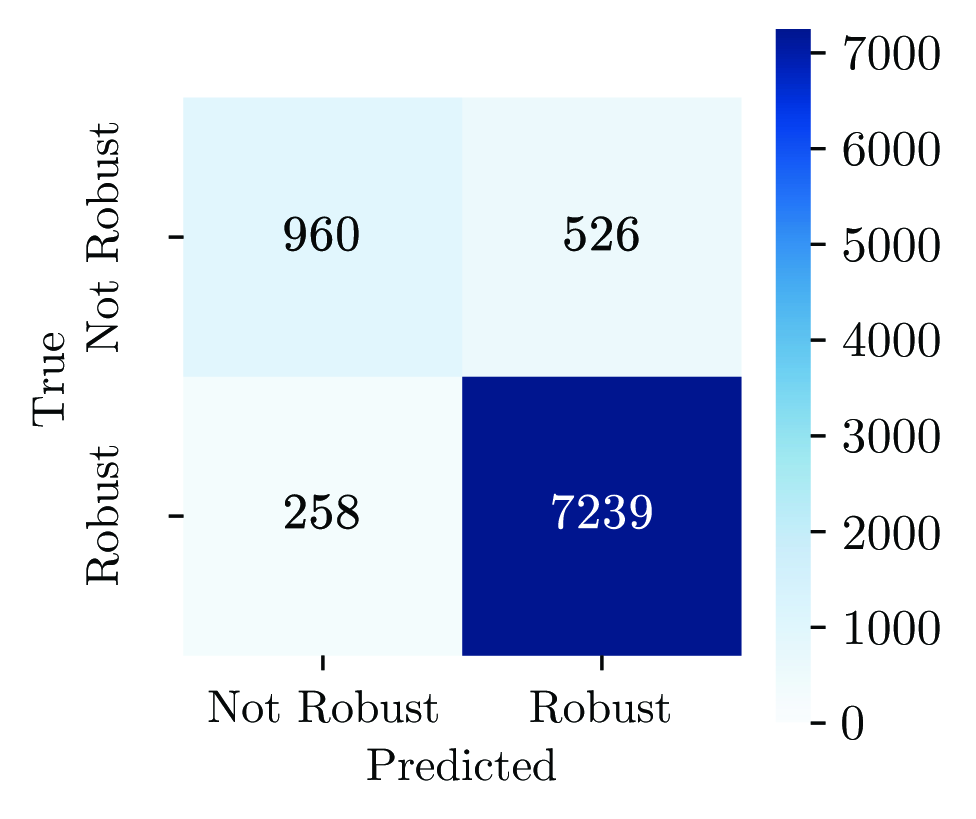
<style>
.page{position:relative;width:976px;height:819px;background:#ffffff}
.page>*{position:absolute;margin:0}
.t1{font:50px "CMUSerif-Roman";color:#060808}
.t2{font:45.8px "CMUSerif-Roman";color:#060808}
.t3{font:50px "CMUSerif-Roman";color:#060808;font-weight:bold}
.t4{font:50px "CMUSerif-Roman";color:#ffffff;font-weight:bold}
</style>
<div class="page">
<p class="t1" style="left:844px;top:35px;width:96px;height:35px">7000</p>
<p class="t2" style="left:86px;top:123px;width:33px;height:229px;rotate:-90deg">Not Robust</p>
<p class="t1" style="left:843px;top:131px;width:97px;height:35px">6000</p>
<p class="t3" style="left:284px;top:216px;width:75px;height:36px">960</p>
<p class="t3" style="left:564px;top:216px;width:75px;height:36px">526</p>
<p class="t1" style="left:843px;top:227px;width:97px;height:35px">5000</p>
<p class="t1" style="left:843px;top:322px;width:97px;height:35px">4000</p>
<p class="t2" style="left:32px;top:333px;width:33px;height:94px;rotate:-90deg">True</p>
<p class="t1" style="left:843px;top:418px;width:97px;height:35px">3000</p>
<p class="t2" style="left:86px;top:446px;width:33px;height:139px;rotate:-90deg">Robust</p>
<p class="t3" style="left:285px;top:494px;width:74px;height:36px">258</p>
<p class="t4" style="left:552px;top:493px;width:100px;height:37px">7239</p>
<p class="t1" style="left:844px;top:515px;width:96px;height:35px">2000</p>
<p class="t1" style="left:846px;top:610px;width:94px;height:35px">1000</p>
<p class="t2" style="left:208px;top:690px;width:230px;height:33px">Not Robust</p>
<p class="t2" style="left:530px;top:690px;width:140px;height:33px">Robust</p>
<p class="t1" style="left:842px;top:705px;width:21px;height:35px">0</p>
<p class="t2" style="left:367px;top:748px;width:189px;height:33px">Predicted</p>
</div>
